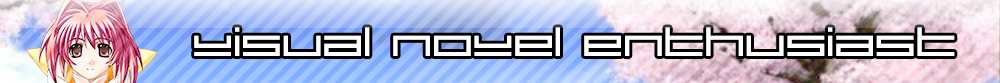
<style>
.page{position:relative;width:1000px;height:83px}
.page>*{position:absolute;margin:0}
.t1{font:65px "SirClive";color:#ffffff}
</style>
<div class="page">
<p class="t1" style="left:194px;top:27px;width:761px;height:29px">visual novel enthusiast</p>
</div>
